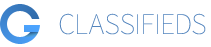
<style>
.page{position:relative;width:211px;height:47px;background:#ffffff}
.page>*{position:absolute;margin:0}
.t1{font:30px "SourceSansPro-ExtraLight";color:#5284bd;text-transform:uppercase}
</style>
<div class="page">
<p class="t1" style="left:59px;top:13px;width:147px;height:22px">CLASSIFIEDS</p>
</div>
